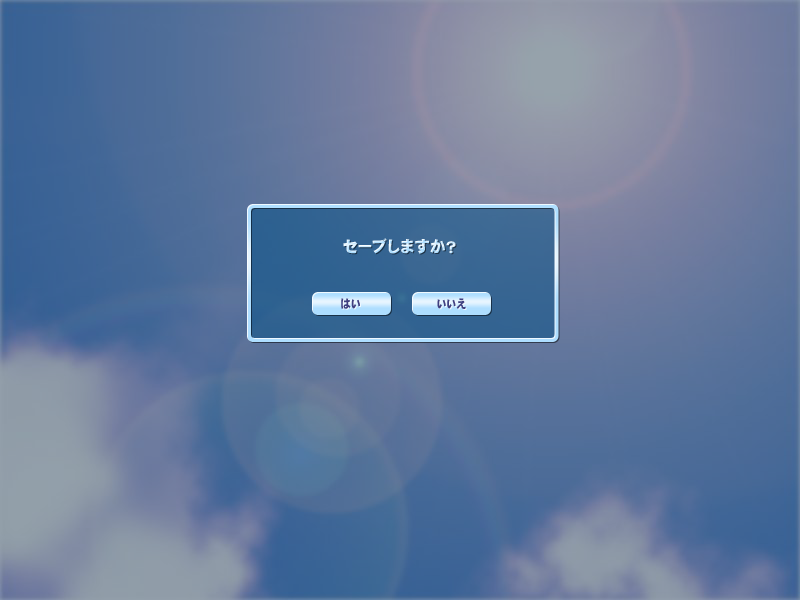
<style>
.page{position:relative;width:800px;height:600px}
.page>*{position:absolute;margin:0}
.t1{font:16px "DFGothic-EB-WING-RKSJ-H";letter-spacing:0.05em}
.t2{font:12px "DFGothic-EB-WING-RKSJ-H";letter-spacing:0.05em;color:#404080;scale:0.87 1}
</style>
<div class="page">
<p class="t1" style="left:343px;top:238px;width:113px;height:16px">セーブしますか？</p>
<p class="t2" style="left:341px;top:298px;width:19px;height:11px">はい</p>
<p class="t2" style="left:437px;top:298px;width:29px;height:11px">いいえ</p>
</div>
